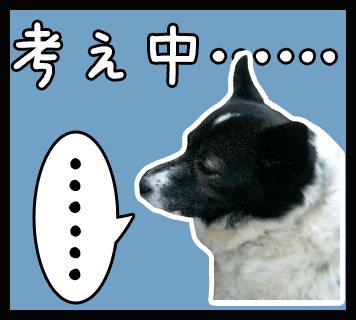
<style>
.page{position:relative;width:356px;height:320px;background:#71a1c5}
.page>*{position:absolute;margin:0}
.t1{font:75.3px "APJapanesefont";color:#ffffff}
.t2{font:75.3px "APJapanesefont";color:#000000}
</style>
<div class="page">
<p class="t1" style="left:13px;top:22px;width:322px;height:66px">考え中……</p>
<p class="t2" style="left:68px;top:158px;width:13px;height:123px">……</p>
</div>
